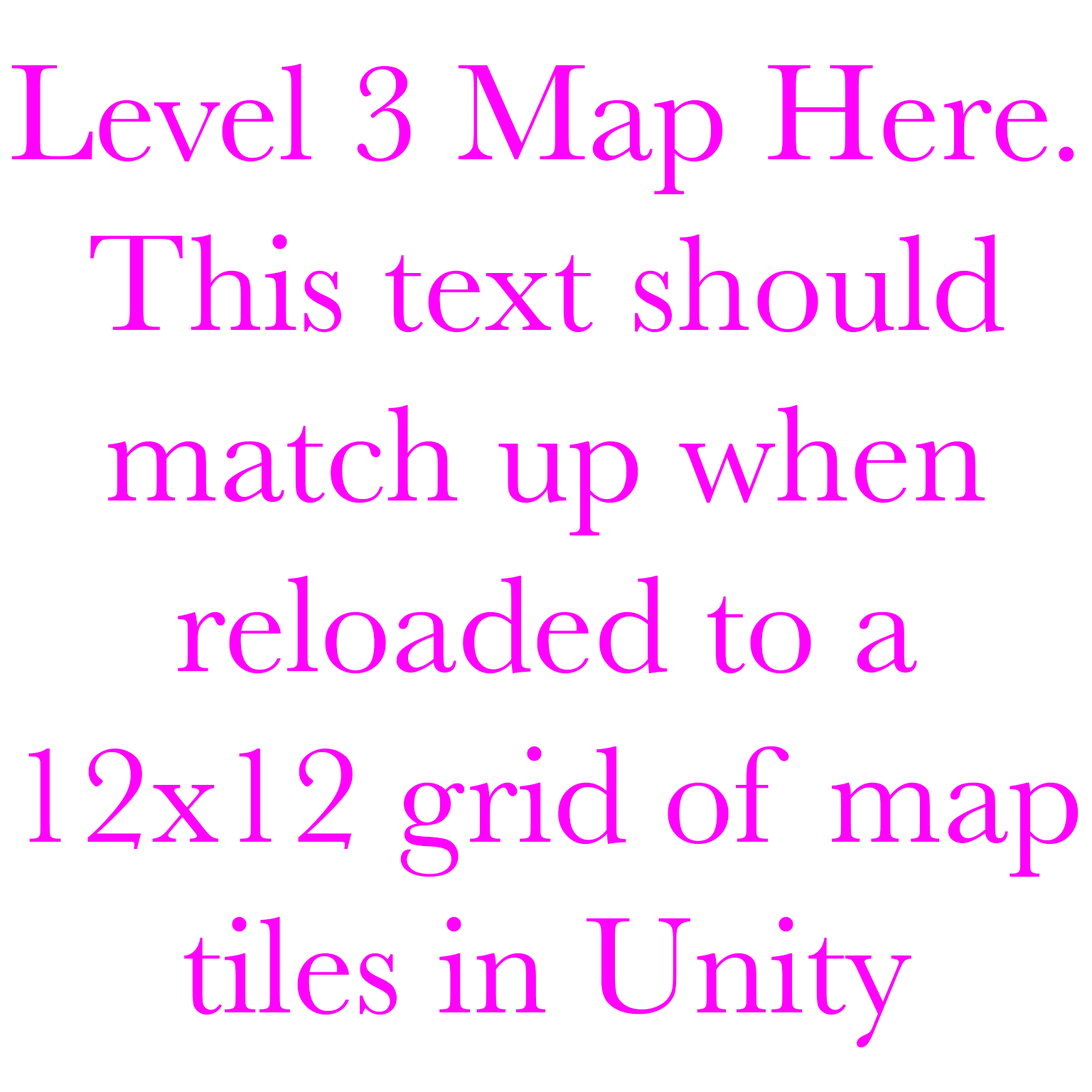
<style>
.page{position:relative;width:1092px;height:1092px;background:#ffffff}
.page>*{position:absolute;margin:0}
.t1{font:142.2px "Baskerville";color:#ff02fb}
</style>
<div class="page">
<p class="t1" style="left:11px;top:63px;width:1067px;height:985px;text-align:center">Level 3 Map Here. This text should match up when <br>reloaded to a 12x12 grid of map tiles in Unity</p>
</div>
